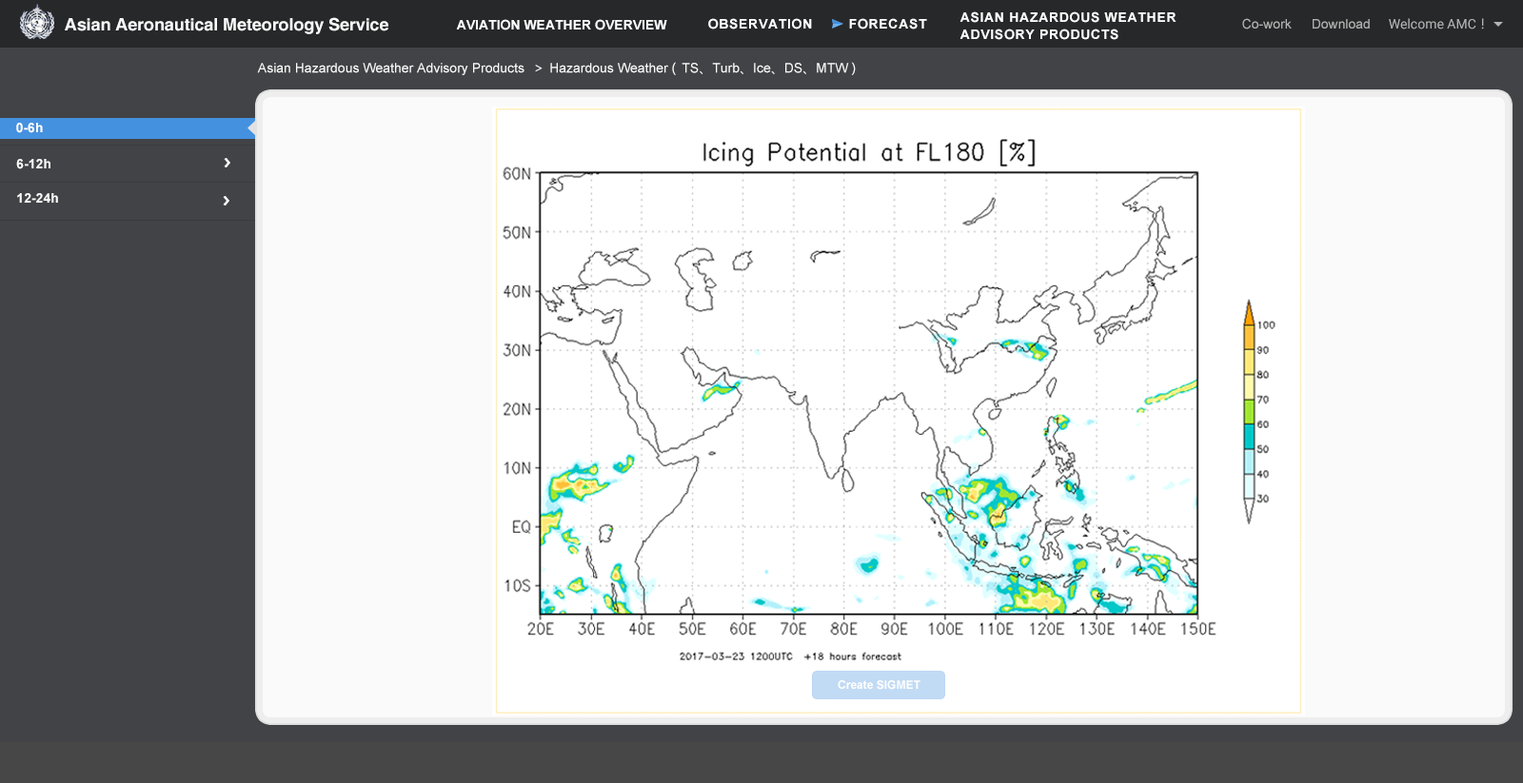
<style>
.page{position:relative;width:1523px;height:783px;background:#ffffff}
.page>*{position:absolute;margin:0}
.t1{font:17.1px "Helvetica-Bold";letter-spacing:-0.005em;color:#fafafa}
.t2{font:13.3px/17.1px "Arial-BoldMT";letter-spacing:0.05em;color:#ffffff}
.t3{font:13.3px "Arial-BoldMT";color:#ffffff}
.t4{font:13.3px "Arial-BoldMT";letter-spacing:0.05em;color:#ffffff}
.t5{font:13.3px "ArialMT";color:#b3b3b3}
.t6{font:13.3px "Roboto-Regular";color:#b3b3b3}
.t7{font:13.3px "MicrosoftYaHei";color:#b3b3b3}
.t8{font:13.3px "ArialMT";color:#ffffff}
.t9{font:13.3px "MicrosoftYaHei";letter-spacing:0.07em;color:#0d2a5b}
.t10{font:13.3px "ArialMT";color:#0d2a5b}
.t11{font:13.3px "MicrosoftYaHei";color:#0d2a5b}
.t12{font:13.3px "Arial-BoldMT";color:#fafafa}
.t13{font:11.4px "Arial-BoldMT";color:#ffffff}
</style>
<div class="page">
<p class="t1" style="left:65px;top:17px;width:323px;height:17px">Asian Aeronautical Meteorology Service</p>
<p class="t2" style="left:959px;top:11px;width:217px;height:29px">ASIAN HAZARDOUS WEATHER<br>ADVISORY PRODUCTS</p>
<p class="t3" style="left:456px;top:19px;width:211px;height:11px">AVIATION WEATHER OVERVIEW</p>
<p class="t4" style="left:708px;top:18px;width:104px;height:11px">OBSERVATION</p>
<p class="t4" style="left:849px;top:18px;width:78px;height:11px">FORECAST</p>
<p class="t5" style="left:1242px;top:18px;width:49px;height:11px">Co-work</p>
<p class="t5" style="left:1312px;top:19px;width:57px;height:10px">Download</p>
<p class="t6" style="left:1388px;top:18px;width:96px;height:11px">Welcome AMC<span class="t7">！</span></p>
<p class="t8" style="left:257px;top:62px;width:598px;height:13px">Asian Hazardous Weather Advisory Products <span class="t9"> &gt; </span>Hazardous Weather <span class="t9">( </span><span class="t10">TS</span><span class="t11">、</span><span class="t10">Turb</span><span class="t11">、</span><span class="t10">Ice</span><span class="t11">、</span><span class="t10">DS</span><span class="t11">、</span><span class="t10">MTW </span><span class="t9">)</span></p>
<p class="t3" style="left:16px;top:123px;width:27px;height:10px">0-6h</p>
<p class="t12" style="left:16px;top:159px;width:34px;height:10px">6-12h</p>
<p class="t12" style="left:17px;top:193px;width:41px;height:10px">12-24h</p>
<p class="t13" style="left:837px;top:680px;width:83px;height:10px">Create SIGMET</p>
</div>
